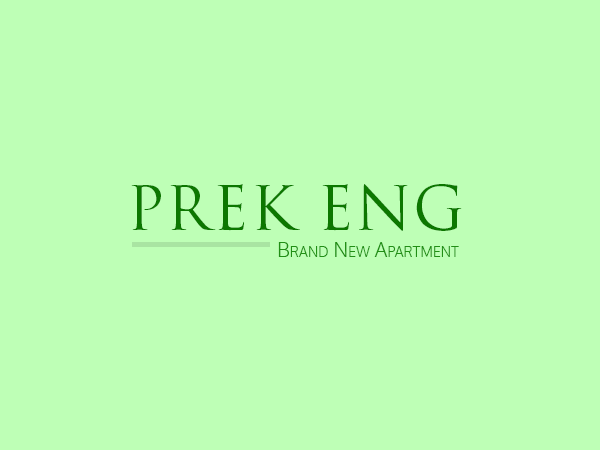
<style>
.page{position:relative;width:600px;height:450px;background:#beffb6}
.page>*{position:absolute;margin:0}
.t1{font:60px "TrajanPro-Regular";letter-spacing:0.025em;color:#0c7700}
.t2{font:20px "Oxygen-Light";letter-spacing:0.01em;color:#218f15;font-variant:small-caps}
</style>
<div class="page">
<p class="t1" style="left:131px;top:184px;width:331px;height:47px">PREK ENG</p>
<p class="t2" style="left:278px;top:242px;width:181px;height:15px">Brand New Apartment</p>
</div>
